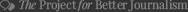
<style>
.page{position:relative;width:188px;height:12px;background:#333333}
.page>*{position:absolute;margin:0}
.t1{font:12px "PlayfairDisplay-Regular";letter-spacing:-0.02em;color:#818181}
.t2{font:12px "PlayfairDisplay-Italic";letter-spacing:-0.02em;color:#818181}
</style>
<div class="page">
<p class="t1" style="left:19px;top:0px;width:169px;height:12px"><span class="t2">The</span> Project <span class="t2">for</span> Better Journalism</p>
</div>
